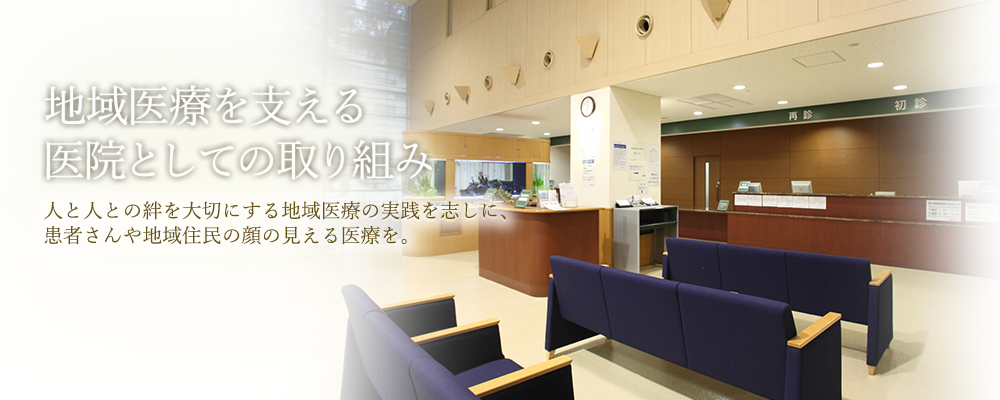
<style>
.page{position:relative;width:1000px;height:400px}
.page>*{position:absolute;margin:0}
.t1{font:43.6px/54.5px "YuMincho-Regular";color:#ffffff}
.t2{font:19.8px/24.8px "YuMincho-Regular";color:#675410}
</style>
<div class="page">
<p class="t1" style="left:45px;top:85px;width:387px;height:95px">地域医療を支える<br>医院としての取り組み</p>
<p class="t2" style="left:44px;top:201px;width:462px;height:44px">人と人との絆を大切にする地域医療の実践を志しに、<br>患者さんや地域住民の顔の見える医療を。</p>
</div>
